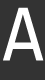
<style>
.page{position:relative;width:45px;height:80px;background:#333333}
.page>*{position:absolute;margin:0}
.t1{font:82.5px "Consolas";color:#ffffff;scale:0.91 1}
</style>
<div class="page">
<p class="t1" style="left:3px;top:7px;width:41px;height:54px">A</p>
</div>
